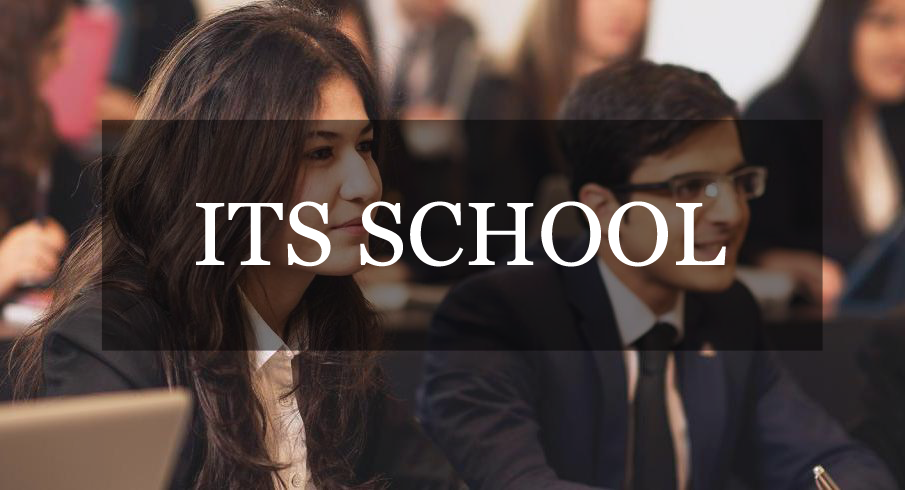
<style>
.page{position:relative;width:905px;height:490px}
.page>*{position:absolute;margin:0}
.t1{font:89.3px "Vani";letter-spacing:0.005em;color:#ffffff}
</style>
<div class="page">
<p class="t1" style="left:196px;top:201px;width:530px;height:66px">ITS SCHOOL</p>
</div>
